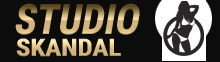
<style>
.page{position:relative;width:220px;height:62px;background:#0c0c0c}
.page>*{position:absolute;margin:0}
.t1{font:41.7px "RobotoCondensed-Bold";font-style:italic;scale:0.97 1}
.t2{font:24.2px "RobotoCondensed-Bold";scale:1.1 1}
</style>
<div class="page">
<p class="t1" style="left:15px;top:3px;width:125px;height:32px">STUDIO</p>
<p class="t2" style="left:16px;top:38px;width:105px;height:19px">SKANDAL</p>
</div>
